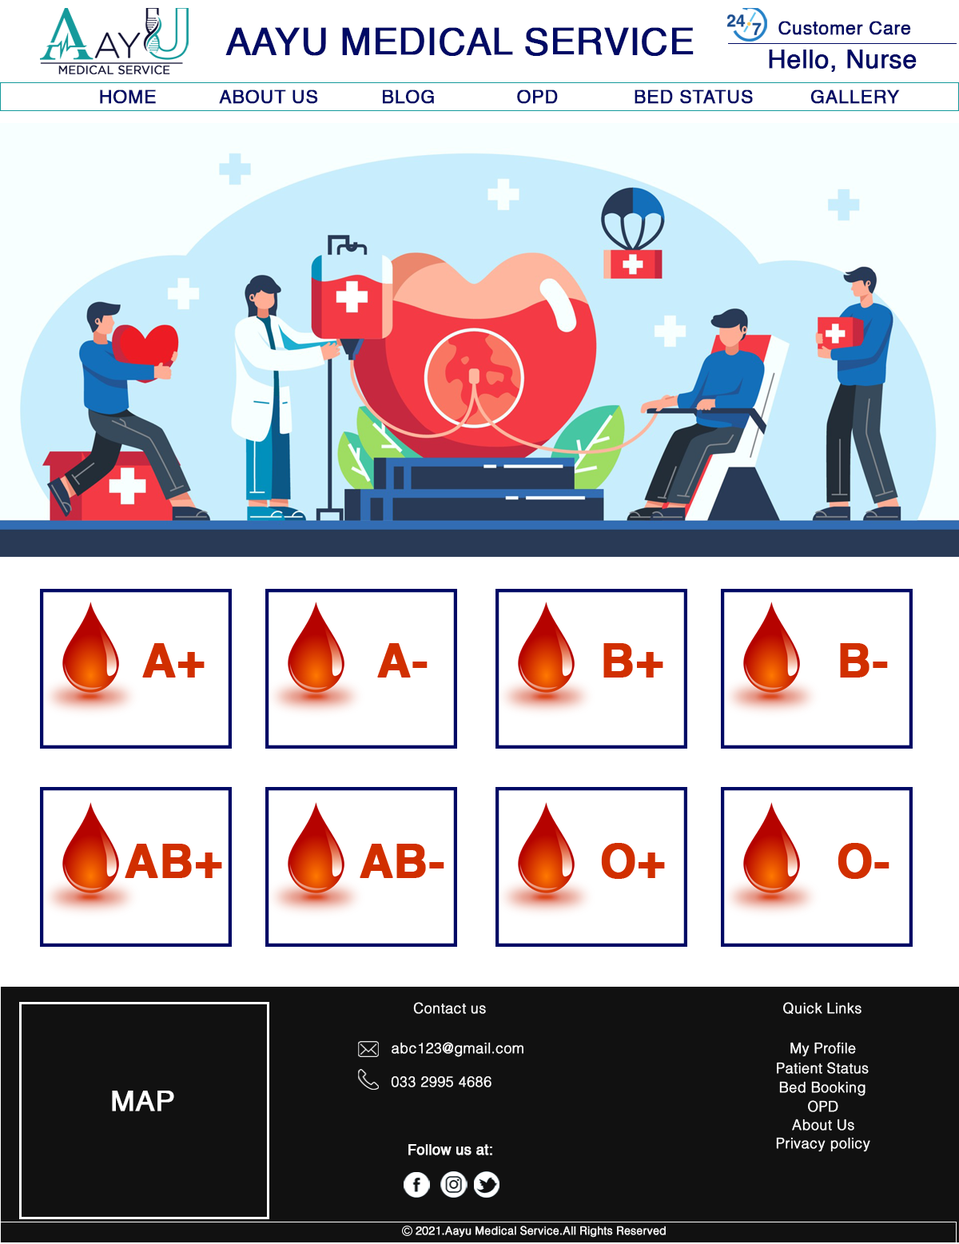
<style>
.page{position:relative;width:959px;height:1244px;background:#ffffff}
.page>*{position:absolute;margin:0}
.t1{font:38.3px "Helvetica";color:#000a65;font-weight:bold}
.t2{font:19.2px "Helvetica";color:#000a65;font-weight:bold}
.t3{font:25.8px "Helvetica";color:#000a65;font-weight:bold}
.t4{font:14.4px "Helvetica-Light";color:#ffffff;font-weight:bold}
.t5{font:28.8px "Helvetica";color:#ffffff;font-weight:bold}
.t6{font:14.4px "Helvetica";color:#ffffff;font-weight:bold}
.t7{font:11.2px "Helvetica-Light";color:#ffffff;font-weight:bold}
</style>
<div class="page">
<p class="t1" style="left:225px;top:27px;width:468px;height:29px">AAYU MEDICAL SERVICE</p>
<p class="t2" style="left:778px;top:21px;width:133px;height:14px">Customer Care</p>
<p class="t3" style="left:769px;top:50px;width:147px;height:22px">Hello, Nurse</p>
<p class="t2" style="left:100px;top:89px;width:56px;height:15px">HOME</p>
<p class="t2" style="left:219px;top:89px;width:99px;height:15px">ABOUT US</p>
<p class="t2" style="left:383px;top:89px;width:51px;height:15px">BLOG</p>
<p class="t2" style="left:517px;top:89px;width:41px;height:15px">OPD</p>
<p class="t2" style="left:634px;top:89px;width:119px;height:15px">BED STATUS</p>
<p class="t2" style="left:810px;top:89px;width:90px;height:15px">GALLERY</p>
<p class="t4" style="left:413px;top:1002px;width:73px;height:12px">Contact us</p>
<p class="t4" style="left:783px;top:1002px;width:78px;height:12px">Quick Links</p>
<p class="t4" style="left:391px;top:1042px;width:132px;height:15px">abc123@gmail.com</p>
<p class="t4" style="left:790px;top:1042px;width:66px;height:15px">My Profile</p>
<p class="t4" style="left:777px;top:1062px;width:91px;height:12px">Patient Status</p>
<p class="t4" style="left:391px;top:1076px;width:100px;height:11px">033 2995 4686</p>
<p class="t4" style="left:779px;top:1081px;width:86px;height:15px">Bed Booking</p>
<p class="t5" style="left:112px;top:1090px;width:62px;height:21px">MAP</p>
<p class="t4" style="left:808px;top:1100px;width:30px;height:12px">OPD</p>
<p class="t4" style="left:792px;top:1118px;width:62px;height:12px">About Us</p>
<p class="t6" style="left:408px;top:1144px;width:84px;height:11px">Follow us at:</p>
<p class="t4" style="left:776px;top:1137px;width:94px;height:15px">Privacy policy</p>
<p class="t7" style="left:415px;top:1225px;width:250px;height:12px">2021.Aayu Medical Service.All Rights Reserved</p>
</div>
